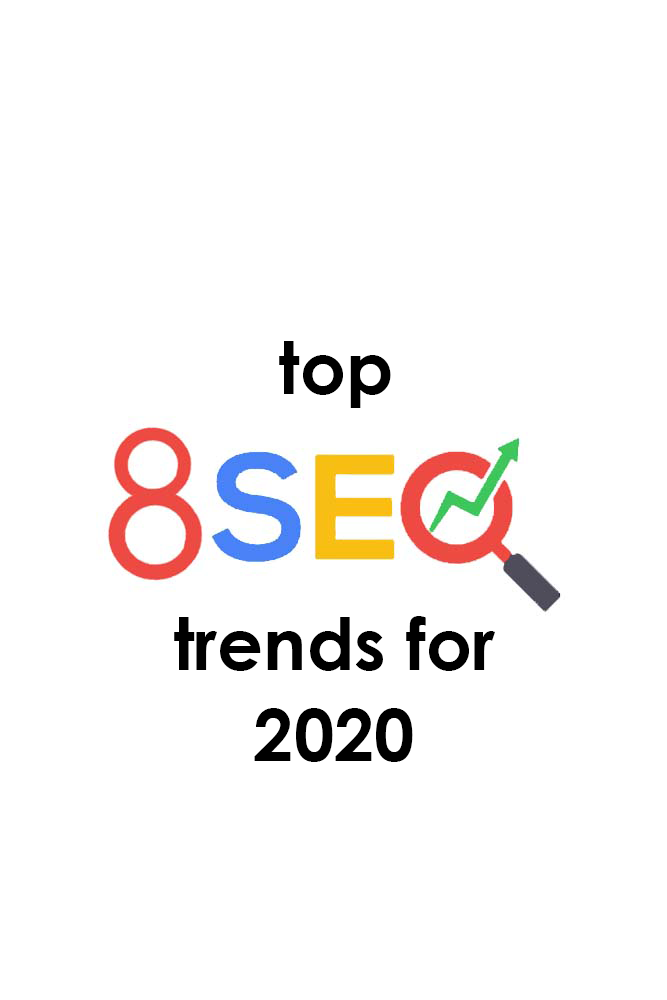
<style>
.page{position:relative;width:667px;height:1000px;background:#ffffff}
.page>*{position:absolute;margin:0}
.t1{font:72px "CenturyGothic-Bold";color:#000000}
.t2{font:72px/91.4px "CenturyGothic-Bold";color:#000000}
</style>
<div class="page">
<p class="t1" style="left:279px;top:341px;width:112px;height:67px">top</p>
<p class="t2" style="left:174px;top:616px;width:321px;height:146px;text-align:center">trends for<br>2020</p>
</div>
